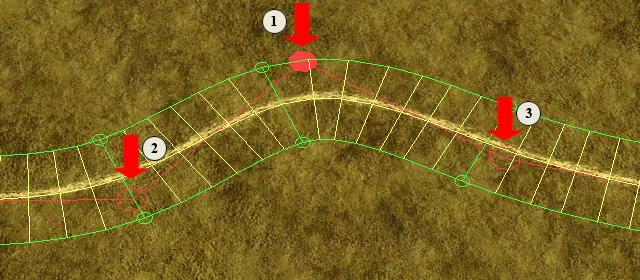
<style>
.page{position:relative;width:640px;height:280px}
.page>*{position:absolute;margin:0}
.t1{font:14px "TimesNewRomanPS-BoldMT";color:#000000}
</style>
<div class="page">
<p class="t1" style="left:271px;top:16px;width:6px;height:10px">1</p>
<p class="t1" style="left:525px;top:108px;width:7px;height:10px">3</p>
<p class="t1" style="left:151px;top:143px;width:7px;height:10px">2</p>
</div>
